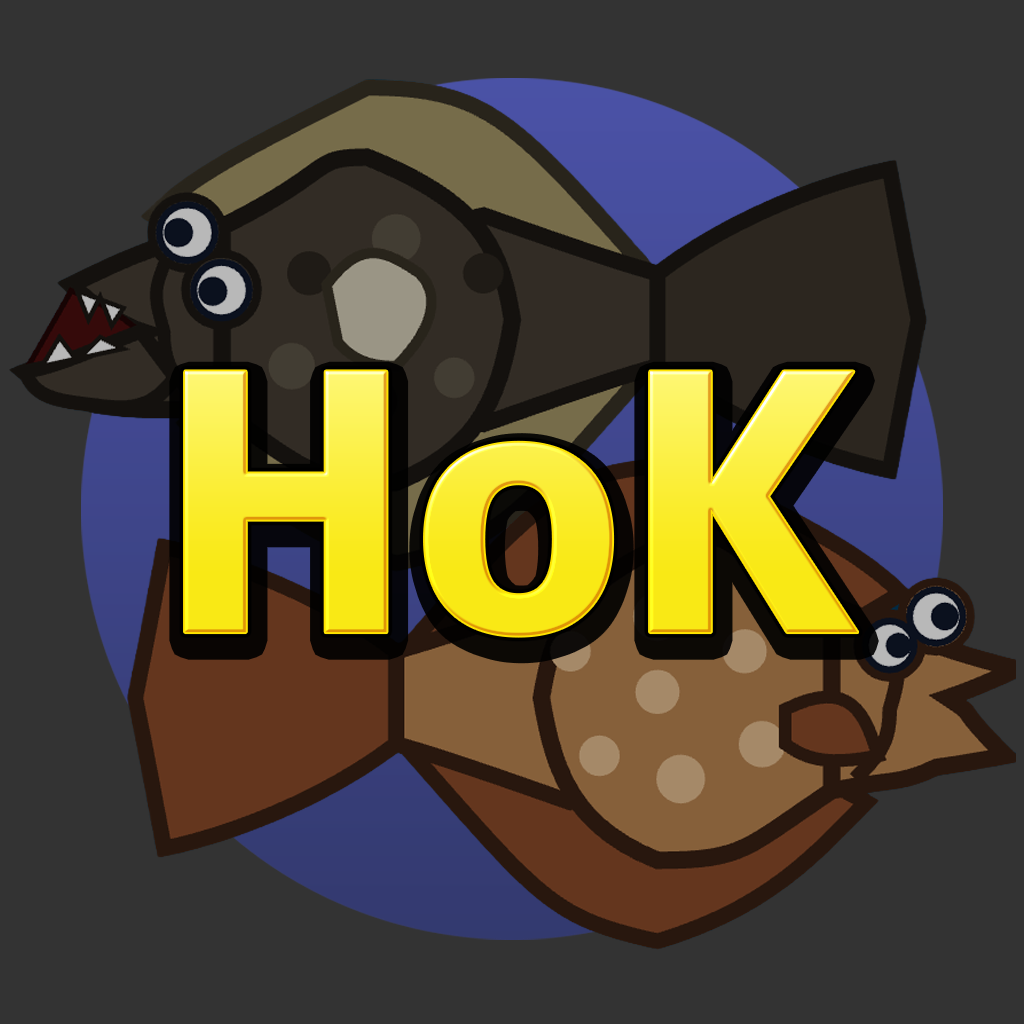
<style>
.page{position:relative;width:1024px;height:1024px;background:#333333}
.page>*{position:absolute;margin:0}
.t1{font:356.9px "07LightNovelPOP"}
</style>
<div class="page">
<p class="t1" style="left:185px;top:371px;width:673px;height:265px">HoK</p>
</div>
